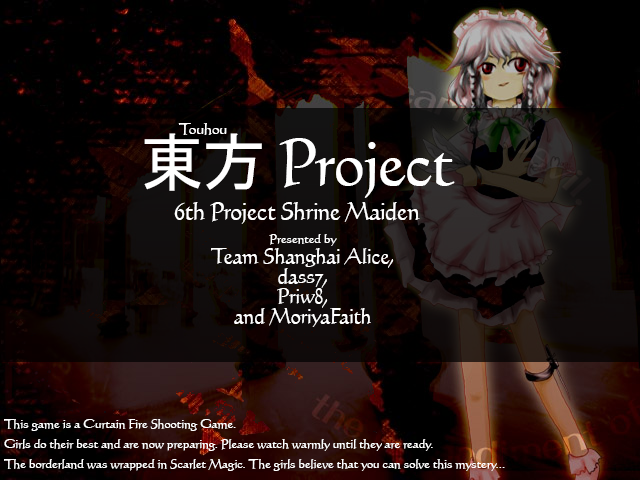
<style>
.page{position:relative;width:640px;height:480px}
.page>*{position:absolute;margin:0}
.t1{font:24px/34.7px "CodexLT";letter-spacing:-0.02em;color:#ffffff}
.t2{font:16px/50.7px "CodexLT";letter-spacing:-0.02em;color:#ffffff}
.t3{font:64px/50.7px "MS-Gothic";letter-spacing:-0.02em;color:#ffffff}
.t4{font:64px/50.7px "CodexLT";letter-spacing:-0.02em;color:#ffffff}
.t5{font:64px/34.7px "CodexLT";letter-spacing:-0.02em;color:#ffffff}
.t6{font:21.3px/20px "CodexLT";letter-spacing:-0.02em;color:#ffffff}
.t7{font:13.3px/20px "CodexLT";letter-spacing:-0.02em;color:#ffffff}
</style>
<div class="page">
<p class="t1" style="left:144px;top:123px;width:311px;height:101px;text-align:center"><span class="t2">Touhou                                                   <br></span><span class="t3">東方</span><span class="t4"> Proje</span><span class="t5">ct<br></span>6th Project Shrine Maiden</p>
<p class="t6" style="left:211px;top:234px;width:183px;height:93px;text-align:center"><span class="t7">Presented by<br></span>Team Shanghai Alice,<br>dass7,<br>Priw8,<br>and MoriyaFaith</p>
<p class="t7" style="left:4px;top:419px;width:501px;height:52px">This game is a Curtain Fire Shooting Game.<br>Girls do their best and are now preparing. Please watch warmly until they are ready.<br>The borderland was wrapped in Scarlet Magic. The girls believe that you can solve this mystery...</p>
</div>
